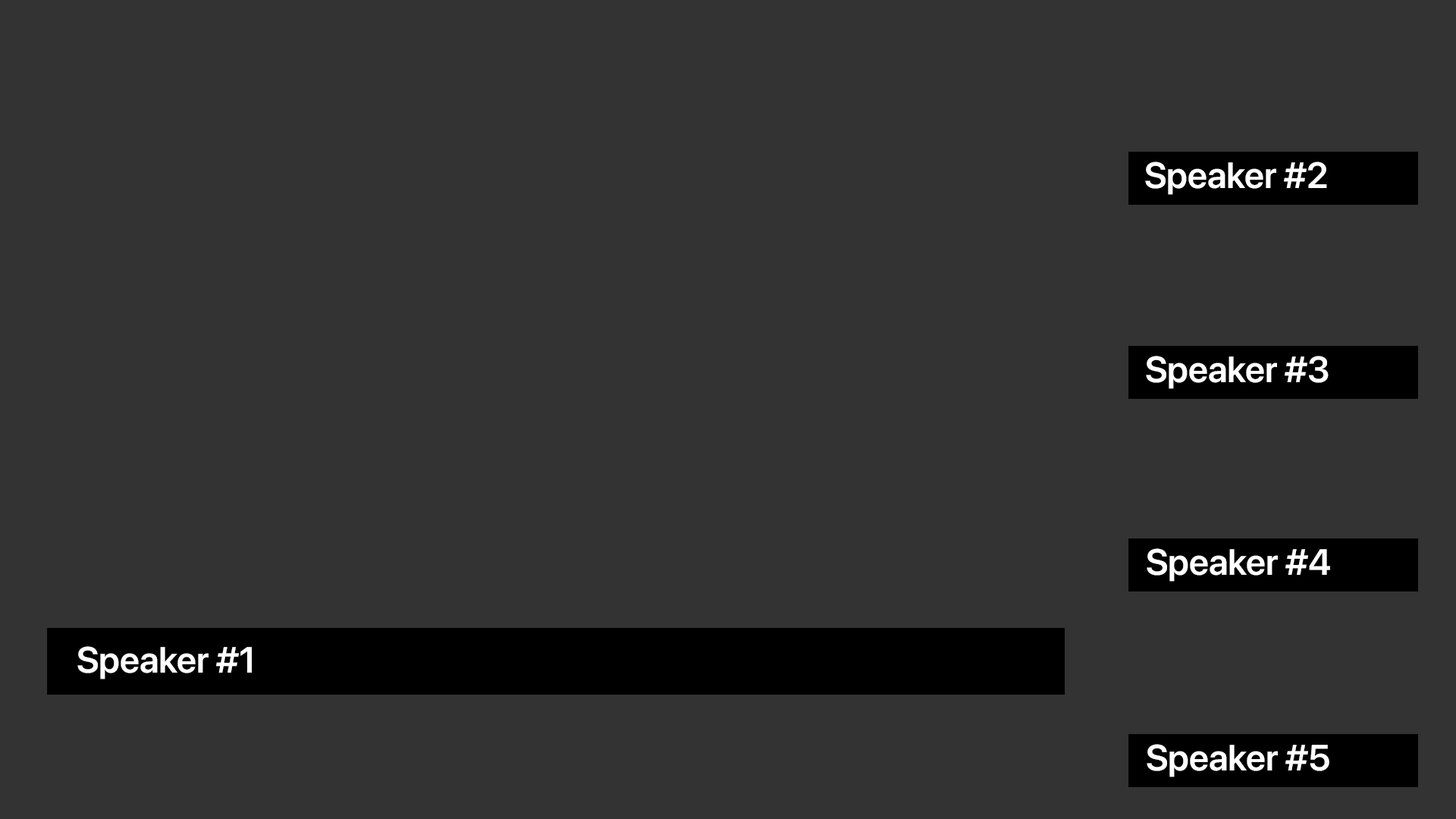
<style>
.page{position:relative;width:1456px;height:819px;background:#333333}
.page>*{position:absolute;margin:0}
.t1{font:36.4px "SFProDisplay-Semibold";color:#ffffff}
</style>
<div class="page">
<p class="t1" style="left:1145px;top:162px;width:182px;height:33px">Speaker #2</p>
<p class="t1" style="left:1146px;top:356px;width:183px;height:33px">Speaker #3</p>
<p class="t1" style="left:1147px;top:548px;width:183px;height:34px">Speaker #4</p>
<p class="t1" style="left:77px;top:646px;width:175px;height:33px">Speaker #1</p>
<p class="t1" style="left:1147px;top:744px;width:182px;height:33px">Speaker #5</p>
</div>
